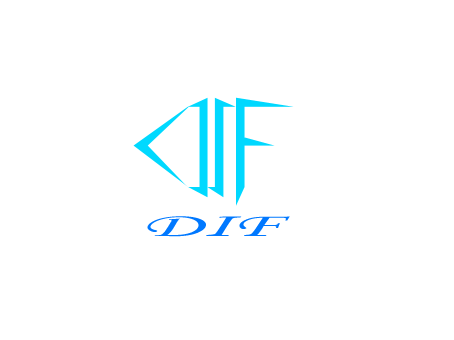
<style>
.page{position:relative;width:454px;height:340px;background:#ffffff}
.page>*{position:absolute;margin:0}
.t1{font:33.6px "MonotypeCorsiva";letter-spacing:0.02em;color:#0078ff;scale:2.56 1}
</style>
<div class="page">
<p class="t1" style="left:147px;top:216px;width:143px;height:21px">DIF</p>
</div>
